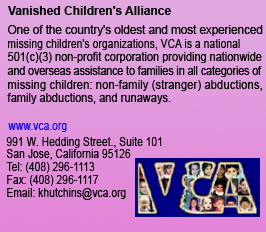
<style>
.page{position:relative;width:266px;height:232px}
.page>*{position:absolute;margin:0}
.t1{font:12px "Arial-BoldMT";color:#000000}
.t2{font:12px "ArialMT";color:#000000;scale:0.97 1}
.t3{font:12px "ArialMT";color:#000000;scale:0.87 1}
.t4{font:12px "ArialMT";color:#000000;scale:0.91 1}
.t5{font:12px "ArialMT";color:#000000;scale:0.88 1}
.t6{font:12px "ArialMT";color:#000000;scale:0.95 1}
.t7{font:12px "ArialMT";color:#000000;scale:0.92 1}
.t8{font:12px "ArialMT";color:#0b0bf9;scale:0.86 1}
.t9{font:12px "ArialMT";color:#000000;scale:0.86 1}
</style>
<div class="page">
<p class="t1" style="left:8px;top:6px;width:163px;height:9px">Vanished Children's Alliance</p>
<p class="t2" style="left:8px;top:25px;width:255px;height:11px">One of the country's oldest and most experienced</p>
<p class="t3" style="left:8px;top:39px;width:232px;height:11px">missing children's organizations, VCA is a national</p>
<p class="t4" style="left:7px;top:52px;width:255px;height:11px">501(c)(3) non-profit corporation providing nationwide</p>
<p class="t5" style="left:7px;top:66px;width:255px;height:11px">and overseas assistance to families in all categories of</p>
<p class="t6" style="left:8px;top:80px;width:254px;height:11px">missing children: non-family (stranger) abductions,</p>
<p class="t7" style="left:7px;top:93px;width:164px;height:11px">family abductions, and runaways.</p>
<p class="t8" style="left:8px;top:123px;width:59px;height:9px">www.vca.org</p>
<p class="t9" style="left:6px;top:137px;width:156px;height:11px">991 W. Hedding Street., Suite 101</p>
<p class="t9" style="left:6px;top:149px;width:125px;height:11px">San Jose, California 95126</p>
<p class="t9" style="left:6px;top:162px;width:89px;height:11px">Tel: (408) 296-1113</p>
<p class="t9" style="left:7px;top:175px;width:92px;height:11px">Fax: (408) 296-1117</p>
<p class="t9" style="left:7px;top:188px;width:119px;height:12px">Email: khutchins@vca.org</p>
</div>
